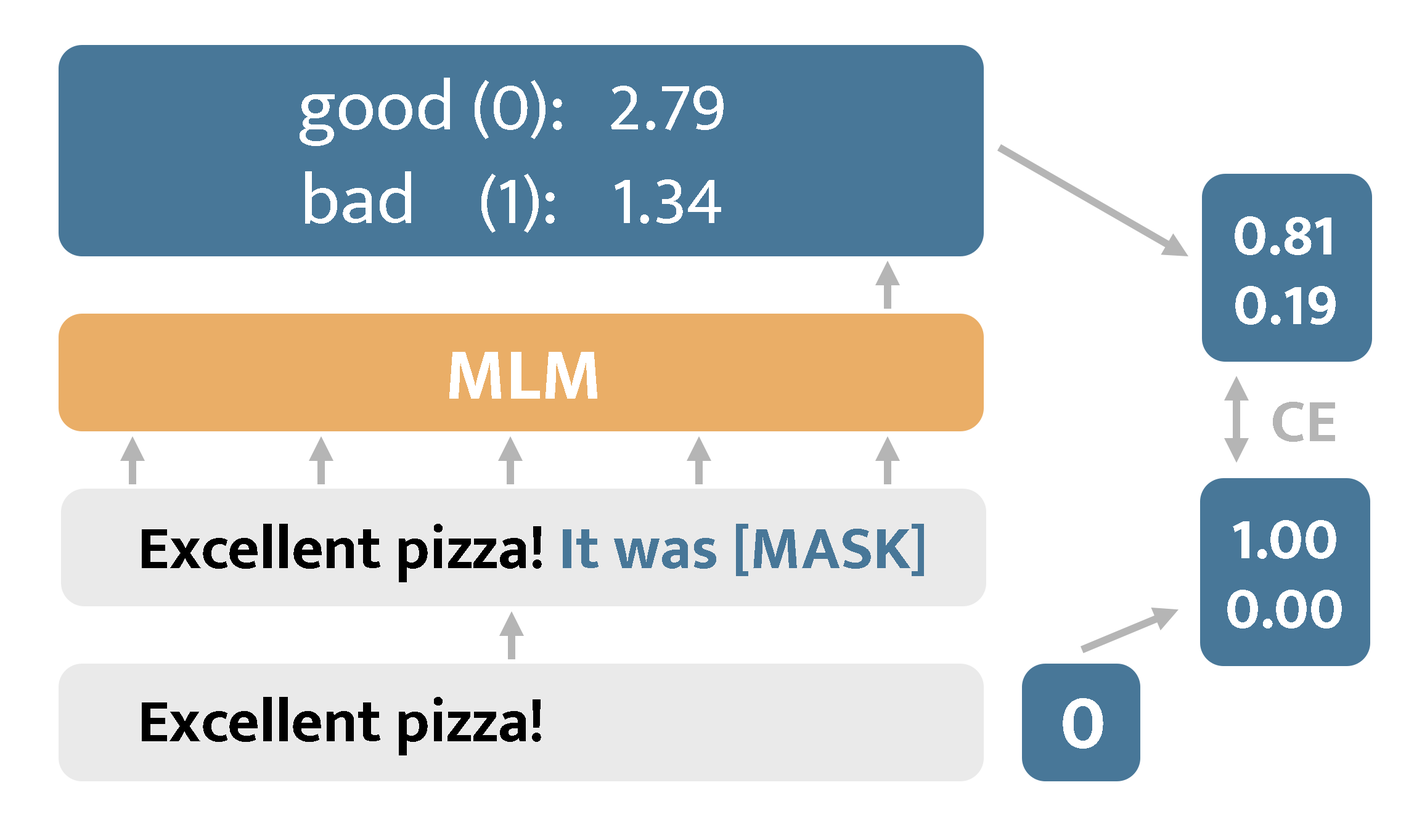
<style>
.page{position:relative;width:1422px;height:838px;background:#ffffff}
.page>*{position:absolute;margin:0}
.t1{font:74px/48.1px "MuktaMahee-Regular";color:#ffffff}
.t2{font:61.6px "MuktaMahee-Bold";color:#ffffff}
.t3{font:74px "MuktaMahee-Bold";color:#ffffff}
.t4{font:61.6px "MuktaMahee-Bold";color:#b5b5b5}
.t5{font:61.6px "MuktaMahee-Bold";color:#000000}
.t6{font:61.6px "MuktaMahee-Bold";color:#487798}
.t7{font:81.4px "MuktaMahee-Bold";color:#ffffff}
</style>
<div class="page">
<p class="t1" style="left:300px;top:78px;width:424px;height:155px;text-align:center">good (0):  2.79<br>bad   (1):   1.34</p>
<p class="t2" style="left:1235px;top:216px;width:97px;height:39px">0.81</p>
<p class="t2" style="left:1235px;top:286px;width:101px;height:39px">0.19</p>
<p class="t3" style="left:449px;top:352px;width:148px;height:47px">MLM</p>
<p class="t4" style="left:1273px;top:402px;width:62px;height:40px">CE</p>
<p class="t2" style="left:1233px;top:520px;width:104px;height:39px">1.00</p>
<p class="t5" style="left:142px;top:524px;width:782px;height:59px">Excellent pizza! <span class="t6">It was [MASK]</span></p>
<p class="t2" style="left:1227px;top:590px;width:115px;height:39px">0.00</p>
<p class="t5" style="left:142px;top:697px;width:399px;height:59px">Excellent pizza!</p>
<p class="t7" style="left:1063px;top:698px;width:41px;height:51px">0</p>
</div>
